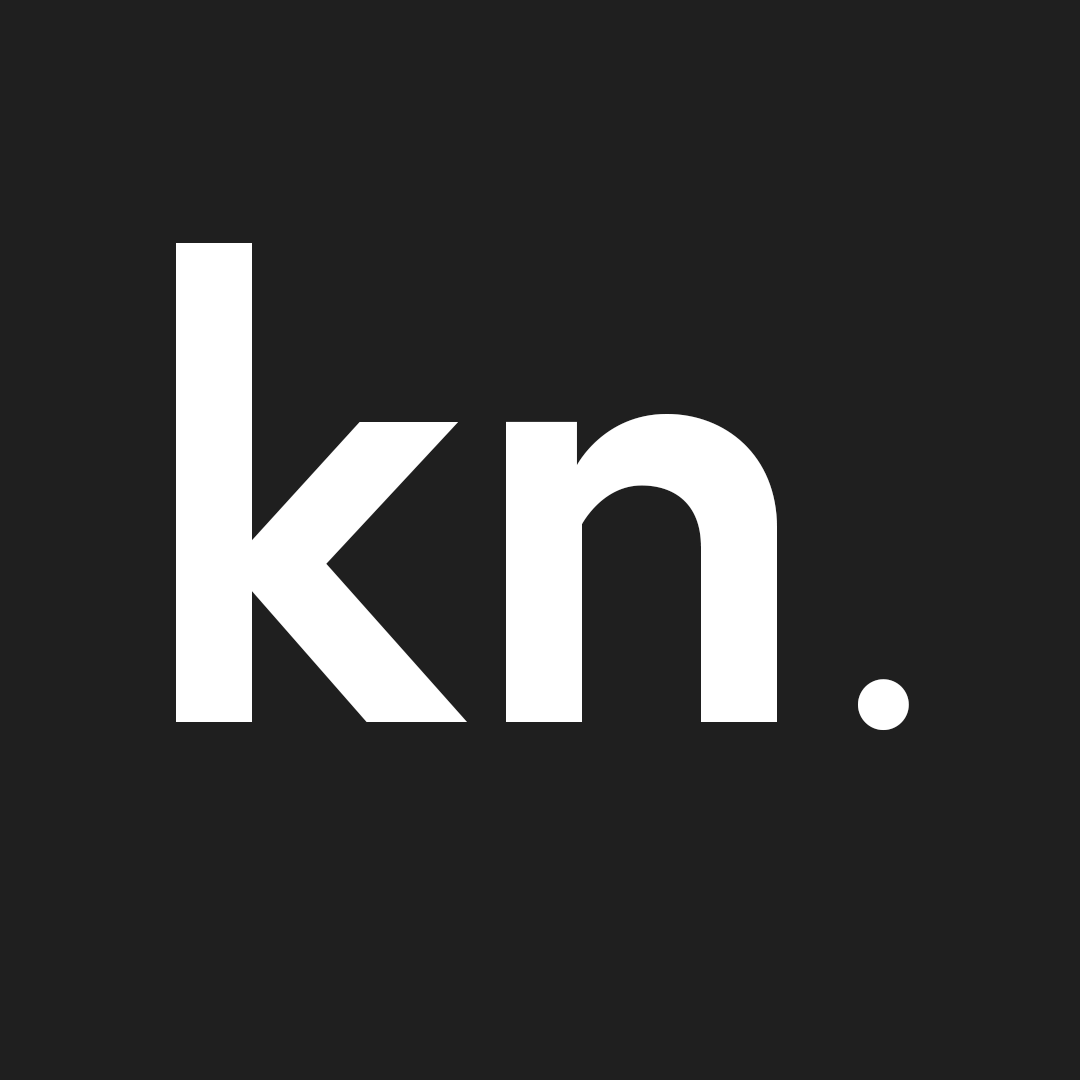
<style>
.page{position:relative;width:1080px;height:1080px;background:#1f1f1f}
.page>*{position:absolute;margin:0}
.t1{font:633.9px "Europa-Bold";color:#ffffff}
.t2{font:633.9px "Europa-Light";color:#ffffff}
</style>
<div class="page">
<p class="t1" style="left:176px;top:243px;width:733px;height:488px">kn<span class="t2">.</span></p>
</div>
